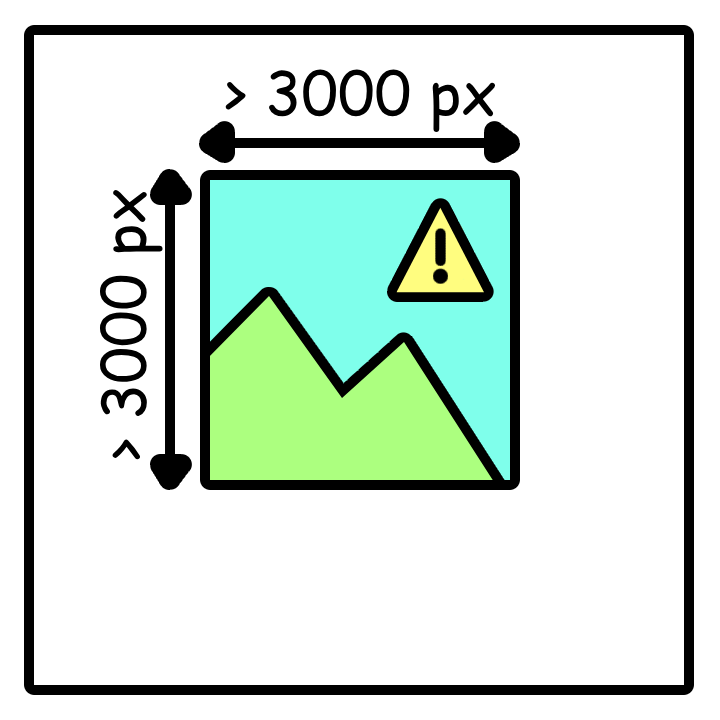
<style>
.page{position:relative;width:720px;height:720px;background:#ffffff}
.page>*{position:absolute;margin:0}
.t1{font:60px "ComicSansMS";color:#000000}
</style>
<div class="page">
<p class="t1" style="left:225px;top:69px;width:270px;height:63px">&gt; 3000 px</p>
<p class="t1" style="left:99px;top:190px;width:64px;height:270px;rotate:-90deg">&gt; 3000 px</p>
</div>
